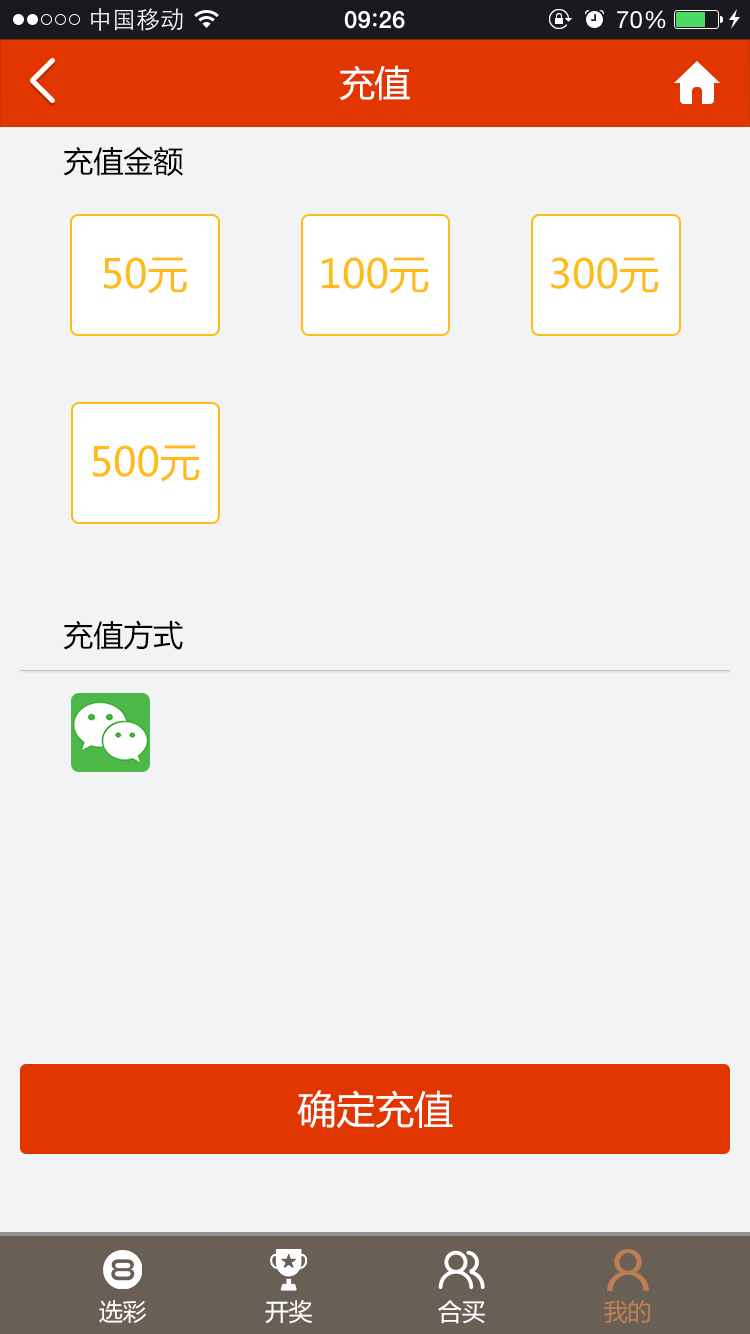
<style>
.page{position:relative;width:750px;height:1334px;background:#f2f3f5}
.page>*{position:absolute;margin:0}
.t1{font:36px "MicrosoftYaHei";letter-spacing:-0.025em;color:#ffffff}
.t2{font:30px "MicrosoftYaHei";color:#000000}
.t3{font:40px "MicrosoftYaHei";color:#ffbb18}
.t4{font:39px "MicrosoftYaHei";color:#ffffff}
.t5{font:24px "MicrosoftYaHei";letter-spacing:-0.025em;color:#ffffff}
.t6{font:24px "MicrosoftYaHei";letter-spacing:-0.025em;color:#bc7e53}
</style>
<div class="page">
<p class="t1" style="left:339px;top:65px;width:71px;height:36px">充值</p>
<p class="t2" style="left:63px;top:146px;width:120px;height:30px">充值金额</p>
<p class="t3" style="left:104px;top:257px;width:83px;height:37px">50元</p>
<p class="t3" style="left:322px;top:257px;width:107px;height:37px">100元</p>
<p class="t3" style="left:551px;top:257px;width:108px;height:37px">300元</p>
<p class="t3" style="left:93px;top:445px;width:107px;height:37px">500元</p>
<p class="t2" style="left:63px;top:620px;width:120px;height:30px">充值方式</p>
<p class="t4" style="left:297px;top:1090px;width:156px;height:39px">确定充值</p>
<p class="t5" style="left:99px;top:1300px;width:47px;height:23px">选彩</p>
<p class="t5" style="left:265px;top:1300px;width:48px;height:24px">开奖</p>
<p class="t5" style="left:438px;top:1300px;width:47px;height:24px">合买</p>
<p class="t6" style="left:604px;top:1300px;width:47px;height:23px">我的</p>
</div>
